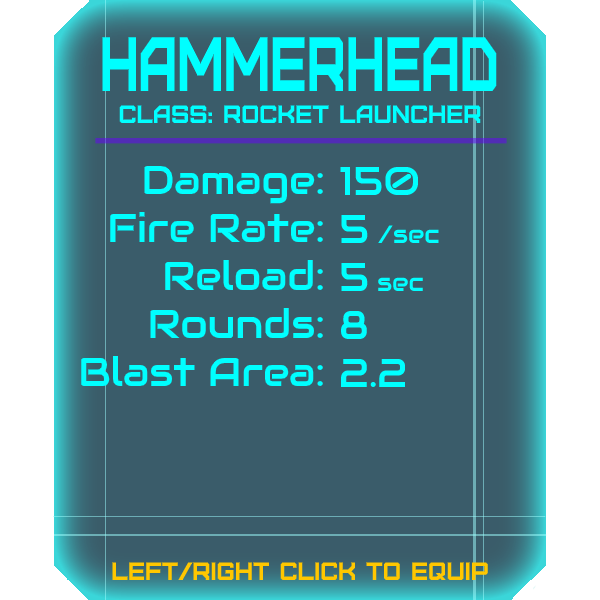
<style>
.page{position:relative;width:600px;height:600px;background:#3a5c6a}
.page>*{position:absolute;margin:0}
.t1{font:76.8px "Furore";color:#00ffff;scale:0.7 1}
.t2{font:25px "Furore";color:#00ffff}
.t3{font:40px "Audiowide-Regular";color:#00ffff}
.t4{font:25px "Audiowide-Regular";color:#00ffff}
.t5{font:25px "Furore";color:#ffc700}
</style>
<div class="page">
<p class="t1" style="left:102px;top:37px;width:395px;height:54px">Hammerhead</p>
<p class="t2" style="left:119px;top:105px;width:362px;height:18px">Class: rocket launcher</p>
<p class="t3" style="left:81px;top:165px;width:242px;height:221px;text-align:right">Damage:<br>Fire Rate:<br>Reload:<br>Rounds:<br>Blast Area:</p>
<p class="t3" style="left:340px;top:166px;width:99px;height:221px">150<br>5 <span class="t4">/sec<br></span>5 <span class="t4">sec<br></span>8<br>2.2</p>
<p class="t5" style="left:112px;top:562px;width:376px;height:18px">left/right click to equip</p>
</div>
